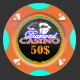
<style>
.page{position:relative;width:80px;height:80px;background:#333333}
.page>*{position:absolute;margin:0}
.t1{font:10.8px/3.6px "EdwardianScriptITC";color:#fda047}
.t2{font:6.3px/5.4px "Castellar";color:#fda047;scale:1.5 1}
.t3{font:10.6px "BernardMT-Condensed";color:#e19012;scale:1.22 1}
</style>
<div class="page">
<p class="t1" style="left:19px;top:30px;width:41px;height:14px;text-align:justify">Diamond<br><span class="t2">CASINO</span></p>
<p class="t3" style="left:31px;top:45px;width:19px;height:10px">50$</p>
</div>
